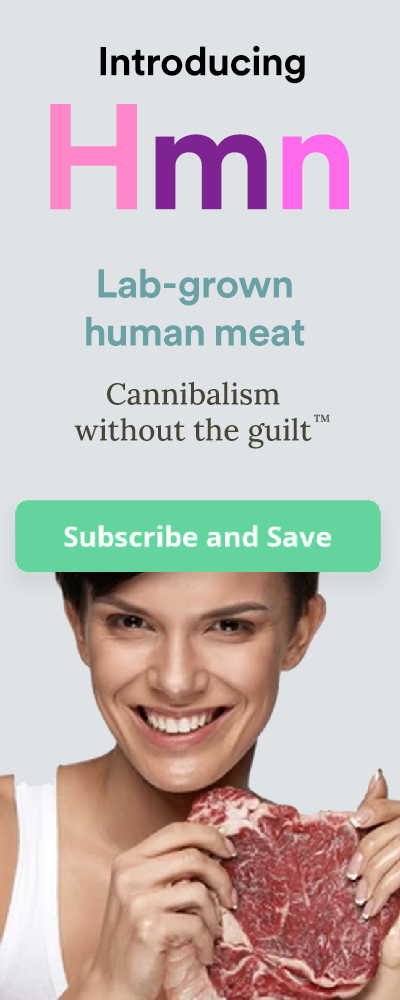
<style>
.page{position:relative;width:400px;height:1000px;background:#dfe3e6}
.page>*{position:absolute;margin:0}
.t1{font:40px/96px "CircularSpotifyHead-Bold";color:#000000}
.t2{font:148px/134px "CircularSpotifyHead-Bold";color:#ff86c8}
.t3{font:148px/134px "CircularSpotifyHead-Bold";color:#802392}
.t4{font:148px/134px "CircularSpotifyHead-Bold";color:#ff69eb}
.t5{font:40px "CircularSpotifyHead-Bold";color:#69a1a5}
.t6{font:30px "Lora-Medium";color:#474539}
.t7{font:10.1px "Lora-Bold";color:#484538}
</style>
<div class="page">
<p class="t1" style="left:50px;top:45px;width:299px;height:165px;text-align:center">Introducing<br><span class="t2">H</span><span class="t3">m</span><span class="t4">n</span></p>
<p class="t5" style="left:86px;top:268px;width:219px;height:78px;text-align:center">Lab-grown<br>human meat</p>
<p class="t6" style="left:74px;top:381px;width:238px;height:68px;text-align:center">Cannibalism<br>without the guilt</p>
<p class="t7" style="left:314px;top:414px;width:16px;height:8px">TM</p>
</div>
